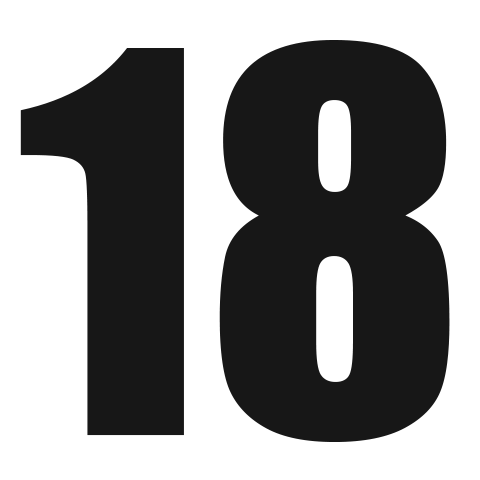
<style>
.page{position:relative;width:480px;height:480px;background:#ffffff}
.page>*{position:absolute;margin:0}
.t1{font:490.3px "Impact";color:#171717}
</style>
<div class="page">
<p class="t1" style="left:20px;top:40px;width:430px;height:402px">18</p>
</div>
